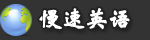
<style>
.page{position:relative;width:150px;height:40px;background:#333333}
.page>*{position:absolute;margin:0}
.t1{font:24px "STXinwei";letter-spacing:-0.05em;color:#ffffff;font-weight:bold}
</style>
<div class="page">
<p class="t1" style="left:39px;top:8px;width:91px;height:22px">慢速英语</p>
</div>
